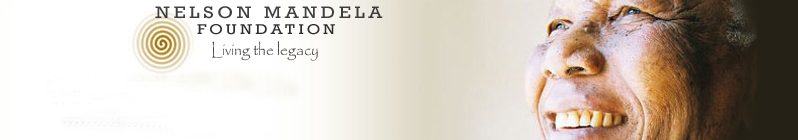
<style>
.page{position:relative;width:798px;height:140px;background:#ffffff}
.page>*{position:absolute;margin:0}
.t1{font:16.8px "Rockwell";letter-spacing:0.2em;color:#403f3f;scale:1.17 1}
.t2{font:14.4px "Rockwell";letter-spacing:0.2em;color:#2e2e2e;scale:1.17 1}
.t3{font:16.8px "Papyrus-Regular";color:#453f3f;scale:0.92 1}
</style>
<div class="page">
<p class="t1" style="left:155px;top:6px;width:228px;height:13px">NELSON MANDELA</p>
<p class="t2" style="left:197px;top:24px;width:138px;height:11px">FOUNDATION</p>
<p class="t3" style="left:212px;top:41px;width:106px;height:20px">Living the legacy</p>
</div>
